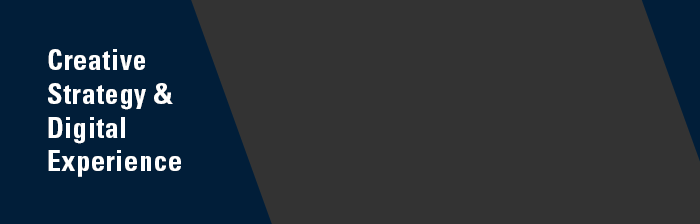
<style>
.page{position:relative;width:700px;height:224px;background:#333333}
.page>*{position:absolute;margin:0}
.t1{font:28px "UniversLTStd-BoldCn";letter-spacing:0.025em;color:#ffffff}
</style>
<div class="page">
<p class="t1" style="left:48px;top:49px;width:133px;height:128px">Creative <br>Strategy &amp;<br>Digital <br>Experience</p>
</div>
